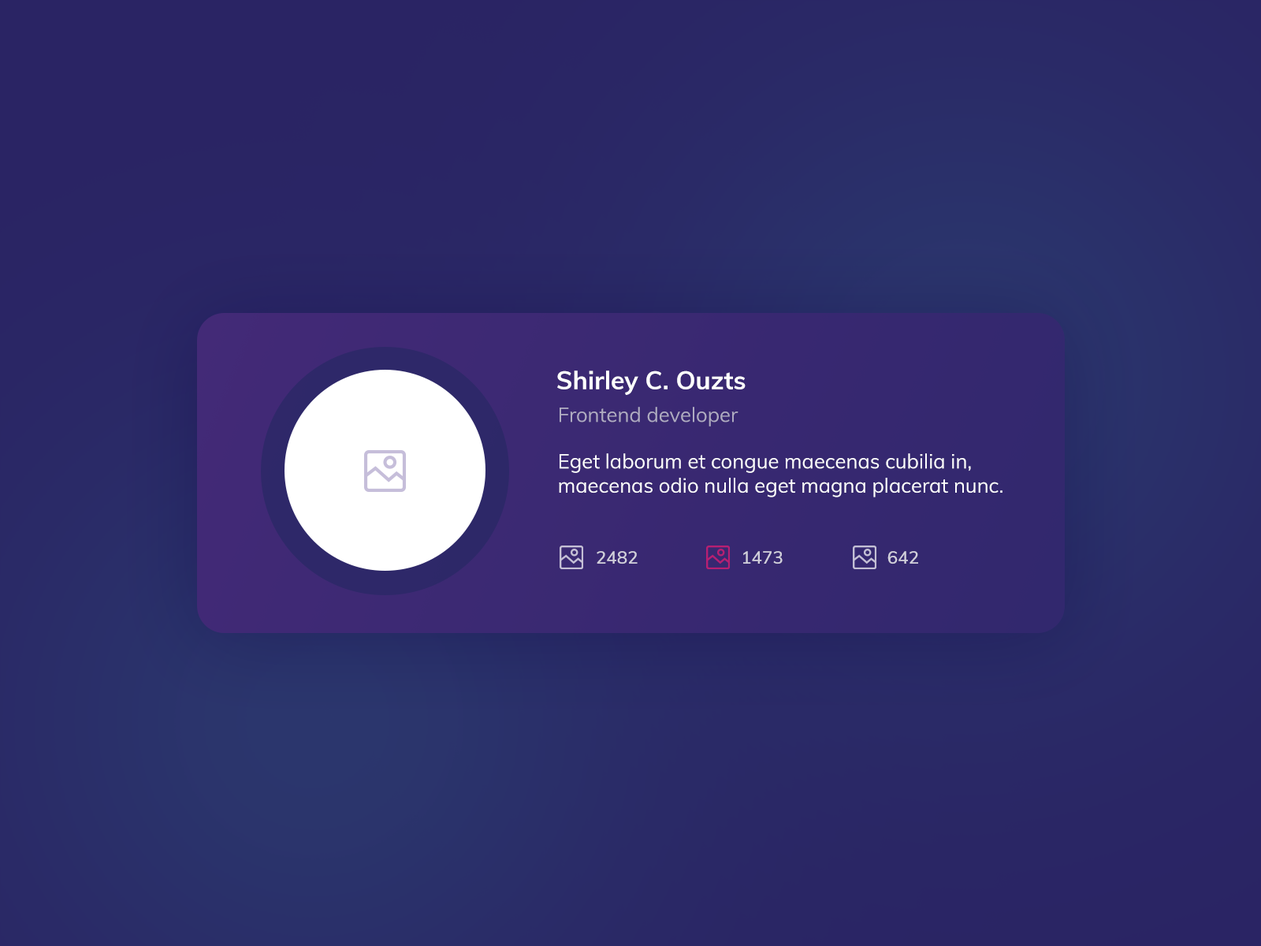
<style>
.page{position:relative;width:1261px;height:946px}
.page>*{position:absolute;margin:0}
.t1{font:25.2px "Muli-Bold";color:#ffffff}
.t2{font:20.2px "Muli-Regular";color:#afabc1}
.t3{font:20.2px "Muli-Regular";color:#ffffff}
.t4{font:17.7px "Muli-SemiBold";color:#d1cfdb}
</style>
<div class="page">
<p class="t1" style="left:557px;top:370px;width:189px;height:25px">Shirley C. Ouzts</p>
<p class="t2" style="left:560px;top:407px;width:178px;height:19px">Frontend developer</p>
<p class="t3" style="left:559px;top:453px;width:443px;height:44px">Eget laborum et congue maecenas cubilia in, maecenas odio nulla eget magna placerat nunc.</p>
<p class="t4" style="left:597px;top:551px;width:41px;height:13px">2482</p>
<p class="t4" style="left:743px;top:551px;width:40px;height:13px">1473</p>
<p class="t4" style="left:887px;top:551px;width:31px;height:13px">642</p>
</div>
